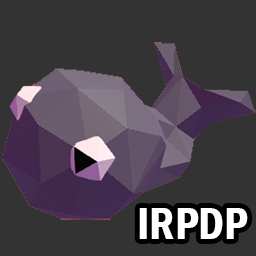
<style>
.page{position:relative;width:256px;height:256px;background:#333333}
.page>*{position:absolute;margin:0}
.t1{font:46.4px "FranklinGothic-DemiCond";color:#ffffff}
</style>
<div class="page">
<p class="t1" style="left:139px;top:208px;width:109px;height:31px">IRPDP</p>
</div>
